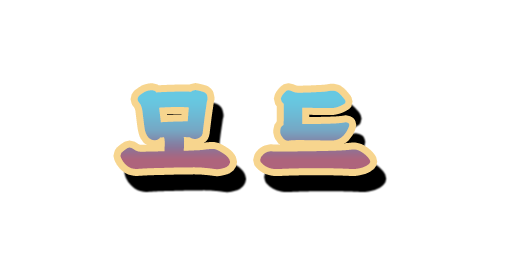
<style>
.page{position:relative;width:512px;height:256px;background:#ffffff}
.page>*{position:absolute;margin:0}
.t1{font:125px "BMEULJIROTTF";letter-spacing:0.22em}
</style>
<div class="page">
<p class="t1" style="left:120px;top:90px;width:251px;height:80px">모드</p>
</div>
